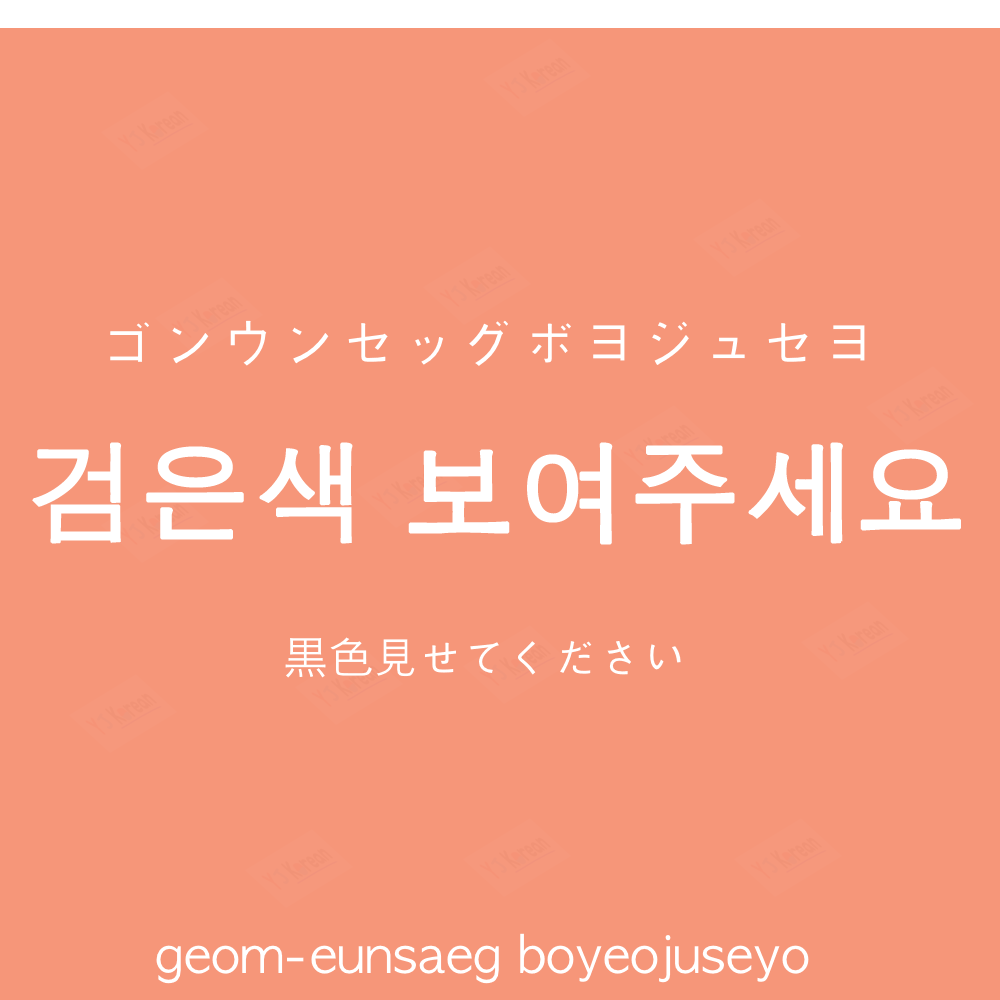
<style>
.page{position:relative;width:1000px;height:1000px;background:#f69679}
.page>*{position:absolute;margin:0}
.t1{font:60px "AppleGothic";color:#ffffff}
.t2{font:110px "AppleGothic";color:#ffffff;font-weight:bold}
.t3{font:45px "AppleGothic";color:#ffffff}
.t4{font:45px "HiraKakuProN-W3";color:#ffffff}
.t5{font:50px "AppleGothic";color:#ffffff}
</style>
<div class="page">
<p class="t1" style="left:110px;top:320px;width:755px;height:46px">ゴンウンセッグボヨジュセヨ</p>
<p class="t2" style="left:32px;top:442px;width:929px;height:103px">검은색 보여주세요</p>
<p class="t3" style="left:285px;top:637px;width:396px;height:41px"><span class="t4">黒</span>色見せてください</p>
<p class="t5" style="left:156px;top:933px;width:653px;height:51px">geom-eunsaeg boyeojuseyo</p>
</div>
